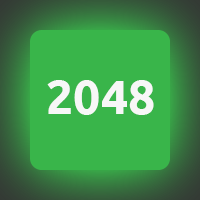
<style>
.page{position:relative;width:200px;height:200px;background:#39b54a}
.page>*{position:absolute;margin:0}
.t1{font:48px "Ubuntu-Bold";color:#f7f7f7}
</style>
<div class="page">
<p class="t1" style="left:47px;top:80px;width:107px;height:35px">2048</p>
</div>
